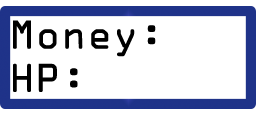
<style>
.page{position:relative;width:256px;height:122px;background:#ffffff}
.page>*{position:absolute;margin:0}
.t1{font:36px "OCRAStd";color:#000000}
</style>
<div class="page">
<p class="t1" style="left:13px;top:20px;width:143px;height:72px;text-align:center">Money: <br>HP:</p>
</div>
